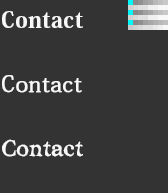
<style>
.page{position:relative;width:168px;height:193px;background:#333333}
.page>*{position:absolute;margin:0}
.t1{font:22px/64px "KozMinPro-Heavy";letter-spacing:0.022em;color:#f8f8f8}
.t2{font:22px/64px "AdobeFangsongStd-Regular";letter-spacing:0.028em;color:#f8f8f8;font-weight:bold}
.t3{font:22px/64px "ComicMysteryStd-DB";letter-spacing:-0.006em;color:#f8f8f8}
</style>
<div class="page">
<p class="t1" style="left:2px;top:11px;width:81px;height:146px">Contact<br><span class="t2">Contact<br></span><span class="t3">Contact</span></p>
</div>
